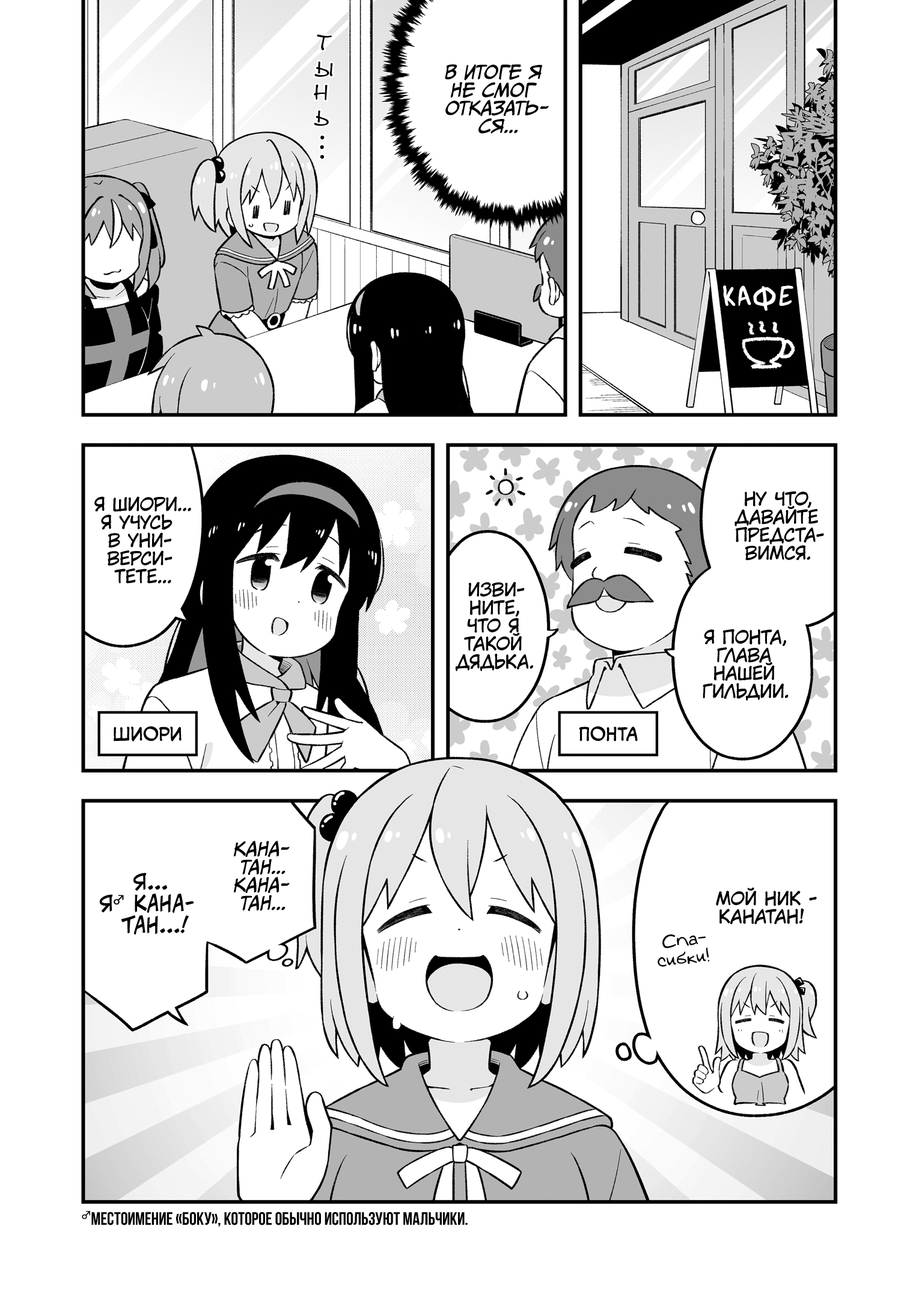
<style>
.page{position:relative;width:919px;height:1298px;background:#ffffff}
.page>*{position:absolute;margin:0}
.t1{font:21.6px "DSNote";color:#000000;font-weight:bold}
.t2{font:18px "CCMeanwhile";color:#000000;text-transform:uppercase;font-style:italic}
.t3{font:29px "SuperWebcomicBros.Rusbyyakustick";color:#ffffff;font-weight:bold}
.t4{font:18px "KuraiVoice2";color:#000000;text-transform:uppercase}
.t5{font:18px "v_CCMonologous";color:#000000;text-transform:uppercase}
.t6{font:21.6px "v_CCJeffCampbell";color:#000000;text-transform:uppercase}
.t7{font:21.6px "KozGoPr6N-Regular";color:#000000;text-transform:uppercase;font-weight:bold}
.t8{font:18px "v_Augie";color:#000000}
.t9{font:18px "Adderley-Bold";color:#000000;text-transform:uppercase}
.t10{font:18px "KozGoPr6N-Regular";color:#000000;text-transform:uppercase;font-weight:bold}
</style>
<div class="page">
<p class="t1" style="left:317px;top:34px;width:15px;height:16px;rotate:3deg">т</p>
<p class="t1" style="left:314px;top:61px;width:19px;height:16px;rotate:2deg">ы</p>
<p class="t2" style="left:445px;top:64px;width:104px;height:69px;text-align:center">В итоге я<br>не смог<br>отказать-<br>ся...</p>
<p class="t1" style="left:314px;top:84px;width:13px;height:16px;rotate:2deg">н</p>
<p class="t1" style="left:314px;top:111px;width:15px;height:15px;rotate:3deg">ь</p>
<p class="t1" style="left:320px;top:135px;width:4px;height:4px">.</p>
<p class="t1" style="left:320px;top:145px;width:4px;height:4px">.</p>
<p class="t1" style="left:320px;top:155px;width:4px;height:4px">.</p>
<p class="t3" style="left:723px;top:285px;width:70px;height:26px">КАФЕ</p>
<p class="t4" style="left:94px;top:496px;width:97px;height:87px;text-align:center">Я Шиори...<br>Я учусь<br>в уни-<br>верси-<br>тете...</p>
<p class="t4" style="left:734px;top:491px;width:90px;height:70px;text-align:center">Ну что,<br>давайте<br>предста-<br>вимся.</p>
<p class="t4" style="left:455px;top:582px;width:78px;height:89px;text-align:center">Изви-<br>ните,<br>что я<br>такой<br>дядька.</p>
<p class="t4" style="left:702px;top:629px;width:86px;height:72px;text-align:center">Я Понта,<br>глава<br>нашей<br>гильдии.</p>
<p class="t5" style="left:114px;top:726px;width:67px;height:15px">Шиори</p>
<p class="t5" style="left:579px;top:726px;width:59px;height:15px">Понта</p>
<p class="t2" style="left:234px;top:841px;width:56px;height:70px;text-align:center">Кана-<br>тан...<br>Кана-<br>тан...</p>
<p class="t6" style="left:100px;top:872px;width:94px;height:63px;text-align:center">Я...<br>Я<span class="t7">♂</span> кана-<br>тан...!</p>
<p class="t4" style="left:716px;top:887px;width:101px;height:37px;text-align:center">Мой ник -<br>Канатан!</p>
<p class="t8" style="left:657px;top:934px;width:53px;height:33px;text-align:center;rotate:-6deg">Спа-<br>сибки!</p>
<p class="t9" style="left:82px;top:1211px;width:385px;height:16px"><span class="t10">♂</span>местоимение «боку», которое обычно используют мальчики.</p>
</div>
